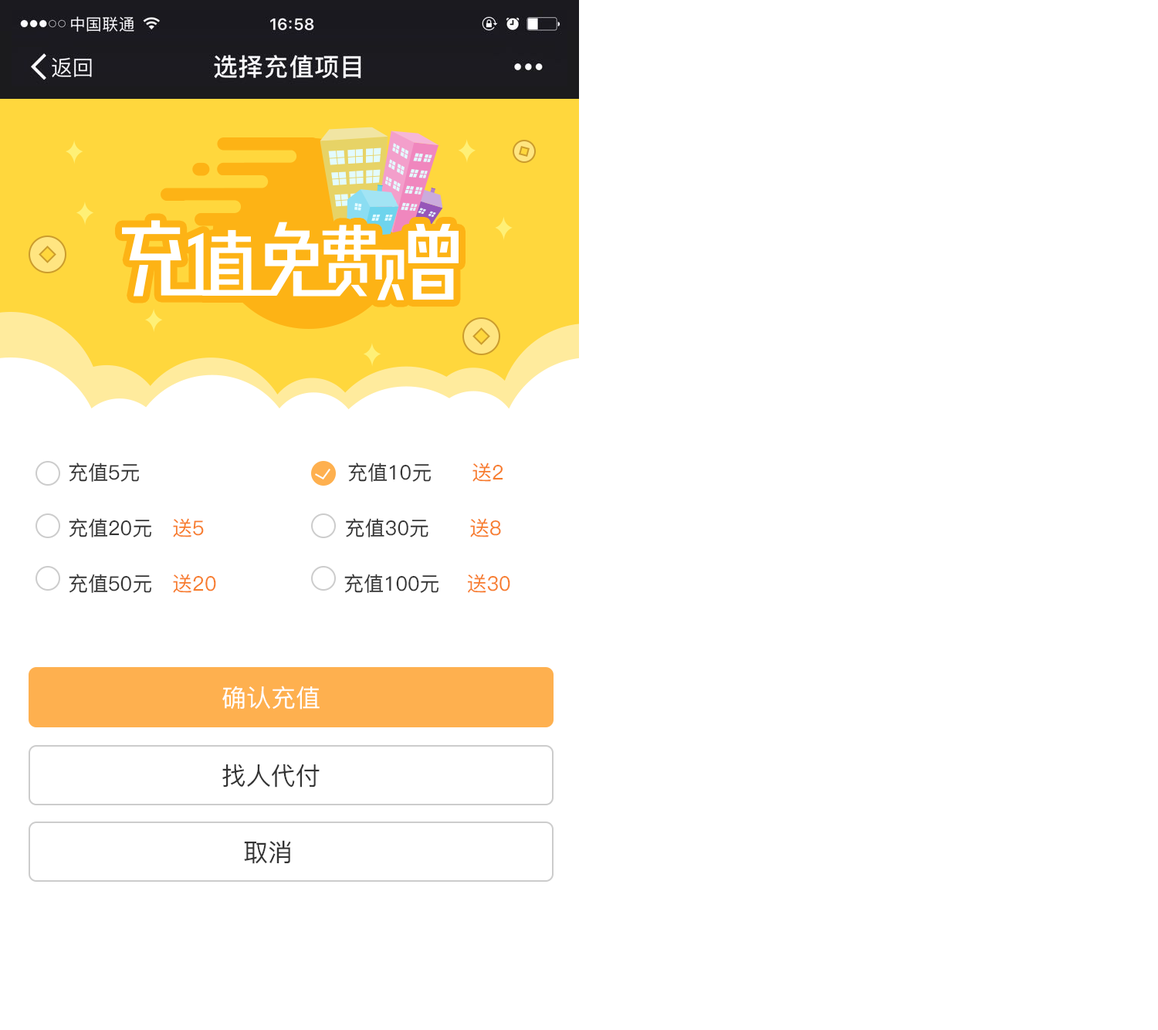
<style>
.page{position:relative;width:1158px;height:1030px;background:#ffffff}
.page>*{position:absolute;margin:0}
.t1{font:20.1px/55.6px "PingFang-SC-Medium";color:#333333}
.t2{font:20.1px/55.6px "PingFang-SC-Medium";color:#f77d2c}
.t3{font:24.7px "PingFang-SC-Medium";color:#ffffff}
.t4{font:24.7px "PingFang-SC-Medium";color:#333333}
</style>
<div class="page">
<p class="t1" style="left:69px;top:462px;width:441px;height:131px">充值5元                               充值10元      <span class="t2">送2<br></span>充值20元   <span class="t2">送5</span>                     充值30元      <span class="t2">送8<br></span>充值50元   <span class="t2">送20</span>                   充值100元 <span class="t2">   送30</span></p>
<p class="t3" style="left:222px;top:685px;width:98px;height:24px">确认充值</p>
<p class="t4" style="left:222px;top:763px;width:98px;height:24px">找人代付</p>
<p class="t4" style="left:244px;top:840px;width:47px;height:24px">取消</p>
</div>
